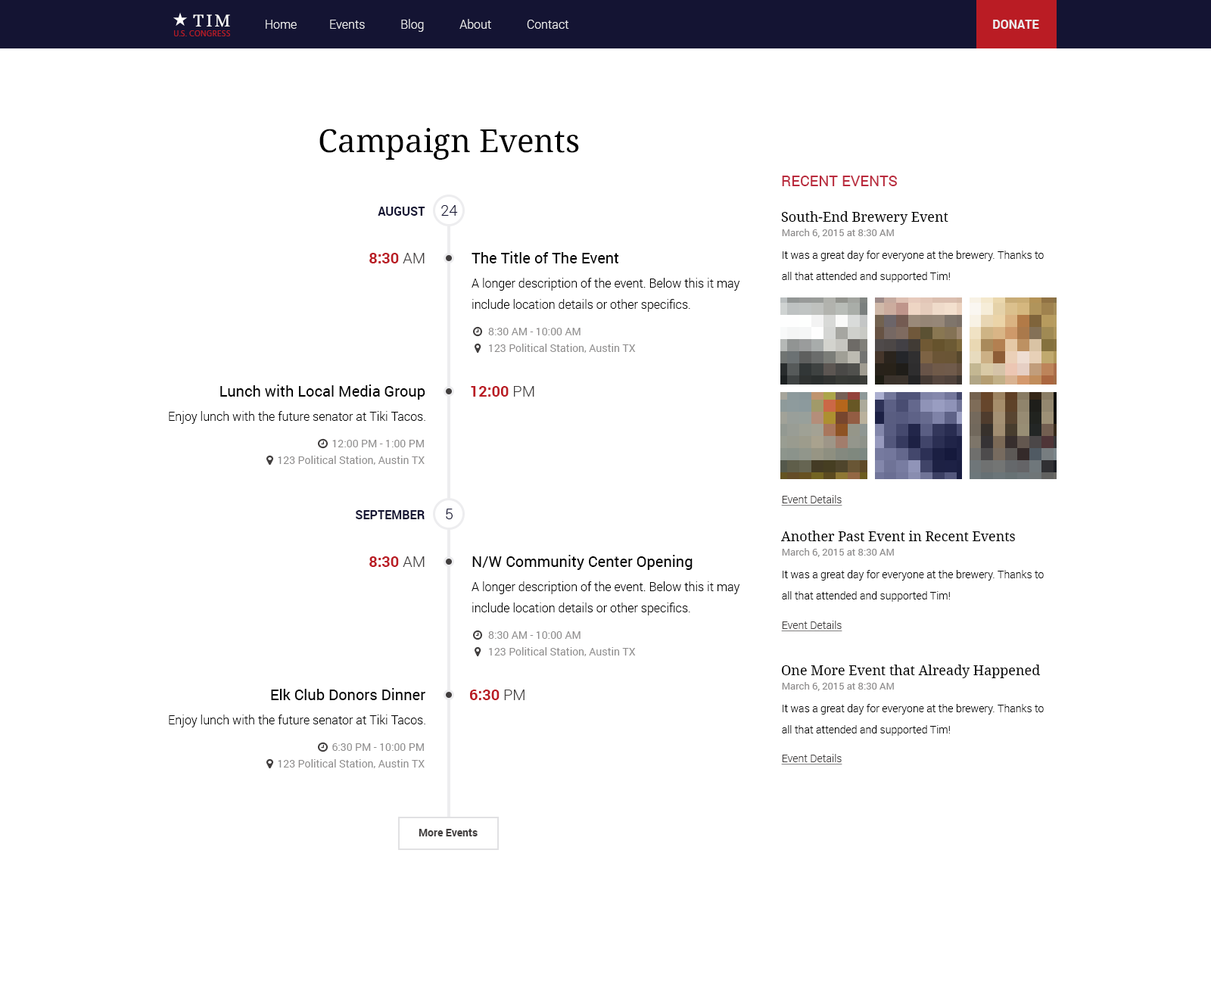
<style>
.page{position:relative;width:1211px;height:984px;background:#ffffff}
.page>*{position:absolute;margin:0}
.t1{font:18.7px "Alice-Regular";letter-spacing:0.1em;color:#ffffff;text-transform:uppercase}
.t2{font:12.1px "Roboto-Light";color:#ededef}
.t3{font:12.1px "Roboto-Bold";color:#ededef}
.t4{font:8.3px "Hind-Regular";letter-spacing:0.03em;color:#ba1c24;text-transform:uppercase}
.t5{font:31.8px "DroidSerif";color:#000000}
.t6{font:15.1px "Roboto-Regular";color:#ba2b3e;text-transform:uppercase}
.t7{font:12.1px "Roboto-Bold";color:#141433;text-transform:uppercase}
.t8{font:15.1px "Roboto-Light";color:#141433;text-transform:uppercase}
.t9{font:13.6px "DroidSerif";color:#000000}
.t10{font:9.8px "Roboto-Regular";color:#8f8d8d}
.t11{font:15.1px "Roboto-Bold";color:#ba1c24;text-transform:uppercase}
.t12{font:15.1px "Roboto-Light";color:#403d3d;text-transform:uppercase}
.t13{font:15.1px "Roboto-Regular";color:#000000}
.t14{font:10.6px/21.2px "Roboto-Light";color:#000000}
.t15{font:12.1px/21.2px "Roboto-Light";color:#000000}
.t16{font:10.6px/16.7px "Roboto-Regular";color:#8f8d8d}
.t17{font:12.1px "Roboto-Light";color:#000000}
.t18{font:10.6px "Roboto-Light";color:#403d3d;text-decoration:underline}
.t19{font:10.6px "Roboto-Bold";color:#403d3d}
</style>
<div class="page">
<p class="t1" style="left:193px;top:14px;width:37px;height:13px">Tim</p>
<p class="t2" style="left:266px;top:19px;width:303px;height:13px">Home           Events            Blog            About            Contact</p>
<p class="t3" style="left:993px;top:20px;width:47px;height:9px">DONATE</p>
<p class="t4" style="left:174px;top:30px;width:56px;height:6px">U.S. Congress</p>
<p class="t5" style="left:320px;top:128px;width:259px;height:32px">Campaign Events</p>
<p class="t6" style="left:782px;top:176px;width:115px;height:10px">Recent Events</p>
<p class="t7" style="left:378px;top:207px;width:48px;height:9px">August</p>
<p class="t8" style="left:441px;top:205px;width:17px;height:11px">24</p>
<p class="t9" style="left:781px;top:211px;width:168px;height:14px">South-End Brewery Event</p>
<p class="t10" style="left:782px;top:229px;width:112px;height:9px">March 6, 2015 at 8:30 AM</p>
<p class="t11" style="left:369px;top:253px;width:56px;height:10px">8:30<span class="t12"> AM</span></p>
<p class="t13" style="left:472px;top:251px;width:147px;height:12px">The Title of The Event</p>
<p class="t14" style="left:782px;top:251px;width:262px;height:31px">It was a great day for everyone at the brewery. Thanks to all that attended and supported Tim!</p>
<p class="t15" style="left:472px;top:278px;width:268px;height:34px">A longer description of the event. Below this it may include location details or other specifics.</p>
<p class="t16" style="left:488px;top:328px;width:148px;height:25px">8:30 AM - 10:00 AM<br>123 Political Station, Austin TX</p>
<p class="t13" style="left:220px;top:385px;width:206px;height:15px">Lunch with Local Media Group</p>
<p class="t11" style="left:471px;top:386px;width:64px;height:11px">12:00<span class="t12"> PM</span></p>
<p class="t17" style="left:169px;top:411px;width:257px;height:13px">Enjoy lunch with the future senator at Tiki Tacos.</p>
<p class="t16" style="left:278px;top:440px;width:147px;height:25px;text-align:right">12:00 PM - 1:00 PM<br>123 Political Station, Austin TX</p>
<p class="t18" style="left:781px;top:495px;width:62px;height:11px">Event Details</p>
<p class="t8" style="left:446px;top:509px;width:7px;height:10px">5</p>
<p class="t7" style="left:356px;top:510px;width:69px;height:9px">September</p>
<p class="t9" style="left:781px;top:531px;width:234px;height:10px">Another Past Event in Recent Events</p>
<p class="t11" style="left:369px;top:557px;width:56px;height:10px">8:30<span class="t12"> AM</span></p>
<p class="t13" style="left:472px;top:555px;width:221px;height:15px">N/W Community Center Opening</p>
<p class="t10" style="left:782px;top:548px;width:112px;height:9px">March 6, 2015 at 8:30 AM</p>
<p class="t15" style="left:472px;top:581px;width:268px;height:35px">A longer description of the event. Below this it may include location details or other specifics.</p>
<p class="t14" style="left:782px;top:570px;width:262px;height:32px">It was a great day for everyone at the brewery. Thanks to all that attended and supported Tim!</p>
<p class="t18" style="left:781px;top:621px;width:62px;height:10px">Event Details</p>
<p class="t16" style="left:488px;top:631px;width:148px;height:25px">8:30 AM - 10:00 AM<br>123 Political Station, Austin TX</p>
<p class="t9" style="left:781px;top:665px;width:260px;height:13px">One More Event that Already Happened</p>
<p class="t13" style="left:271px;top:688px;width:155px;height:12px">Elk Club Donors Dinner</p>
<p class="t11" style="left:470px;top:690px;width:55px;height:10px">6:30<span class="t12"> PM</span></p>
<p class="t10" style="left:782px;top:682px;width:112px;height:9px">March 6, 2015 at 8:30 AM</p>
<p class="t14" style="left:782px;top:704px;width:262px;height:32px">It was a great day for everyone at the brewery. Thanks to all that attended and supported Tim!</p>
<p class="t17" style="left:169px;top:715px;width:257px;height:13px">Enjoy lunch with the future senator at Tiki Tacos.</p>
<p class="t16" style="left:278px;top:744px;width:147px;height:25px;text-align:right">6:30 PM - 10:00 PM<br>123 Political Station, Austin TX</p>
<p class="t18" style="left:781px;top:754px;width:62px;height:11px">Event Details</p>
<p class="t19" style="left:419px;top:829px;width:59px;height:8px">More Events</p>
</div>
